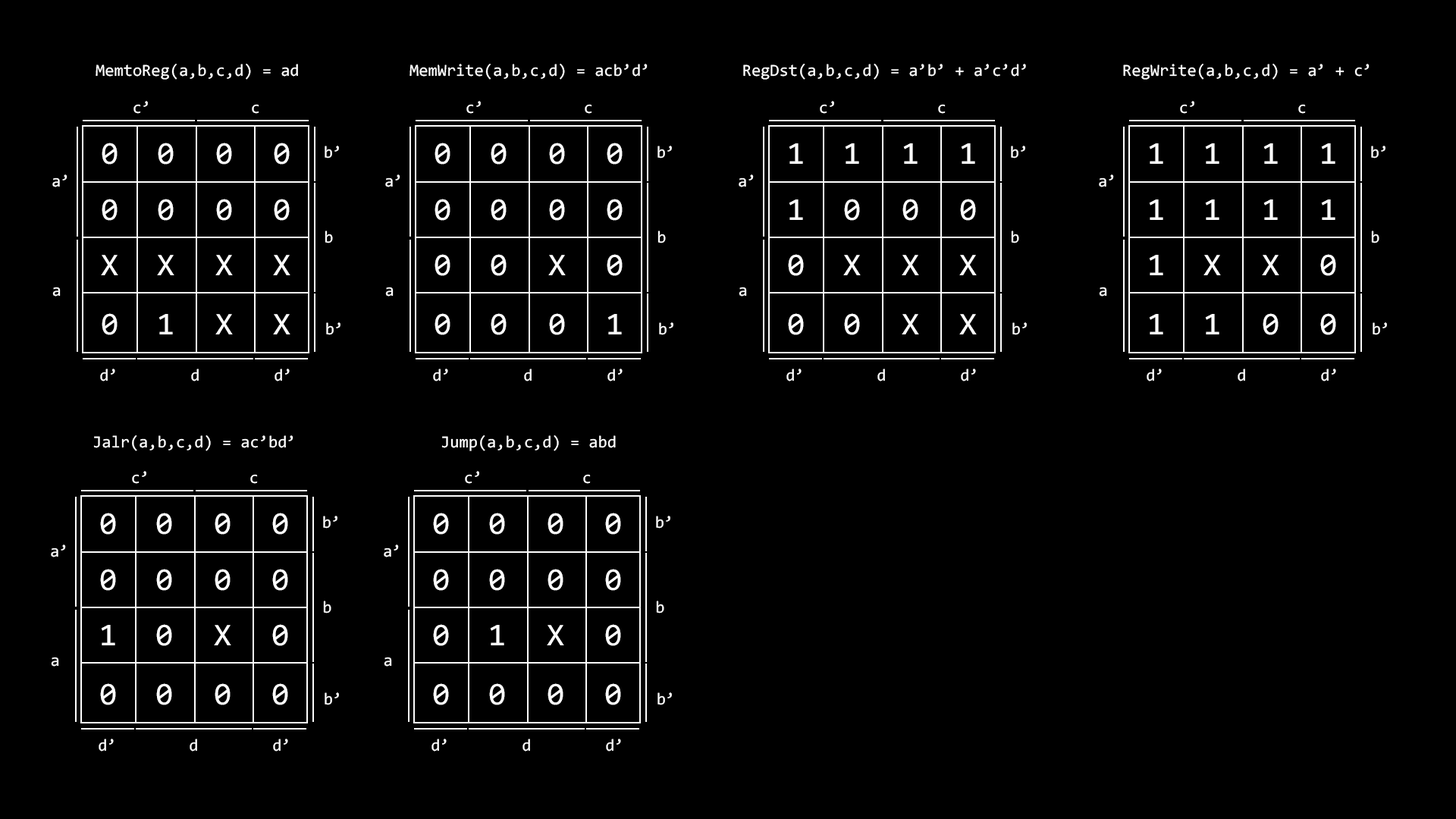
<style>
.page{position:relative;width:1456px;height:819px;background:#000000}
.page>*{position:absolute;margin:0}
.t1{font:16.8px "Consolas";color:#ffffff}
.t2{font:17px "Consolas";color:#ffffff}
.t3{font:31.8px "Consolas";color:#ffffff}
</style>
<div class="page">
<p class="t1" style="left:96px;top:64px;width:202px;height:16px">MemtoReg(a,b,c,d) = ad</p>
<p class="t1" style="left:409px;top:64px;width:239px;height:16px">MemWrite(a,b,c,d) = acb’d’</p>
<p class="t1" style="left:743px;top:64px;width:283px;height:16px">RegDst(a,b,c,d) = a’b’ + a’c’d’</p>
<p class="t1" style="left:1123px;top:64px;width:247px;height:16px">RegWrite(a,b,c,d) = a’ + c’</p>
<p class="t2" style="left:133px;top:101px;width:15px;height:13px">c’</p>
<p class="t2" style="left:466px;top:101px;width:15px;height:13px">c’</p>
<p class="t2" style="left:820px;top:101px;width:14px;height:13px">c’</p>
<p class="t2" style="left:1180px;top:101px;width:14px;height:13px">c’</p>
<p class="t2" style="left:252px;top:104px;width:7px;height:10px">c</p>
<p class="t2" style="left:585px;top:104px;width:7px;height:10px">c</p>
<p class="t2" style="left:938px;top:104px;width:8px;height:10px">c</p>
<p class="t2" style="left:1298px;top:104px;width:8px;height:10px">c</p>
<p class="t3" style="left:102px;top:143px;width:16px;height:22px">0</p>
<p class="t3" style="left:158px;top:143px;width:16px;height:22px">0</p>
<p class="t3" style="left:216px;top:143px;width:16px;height:22px">0</p>
<p class="t3" style="left:274px;top:143px;width:16px;height:22px">0</p>
<p class="t2" style="left:325px;top:146px;width:14px;height:12px">b’</p>
<p class="t3" style="left:435px;top:143px;width:15px;height:22px">0</p>
<p class="t3" style="left:491px;top:143px;width:16px;height:22px">0</p>
<p class="t3" style="left:549px;top:143px;width:16px;height:22px">0</p>
<p class="t3" style="left:607px;top:143px;width:16px;height:22px">0</p>
<p class="t2" style="left:657px;top:146px;width:15px;height:12px">b’</p>
<p class="t3" style="left:789px;top:143px;width:14px;height:21px">1</p>
<p class="t3" style="left:845px;top:143px;width:14px;height:21px">1</p>
<p class="t3" style="left:903px;top:143px;width:15px;height:21px">1</p>
<p class="t3" style="left:961px;top:143px;width:14px;height:21px">1</p>
<p class="t2" style="left:1011px;top:146px;width:14px;height:12px">b’</p>
<p class="t3" style="left:1149px;top:143px;width:14px;height:21px">1</p>
<p class="t3" style="left:1205px;top:143px;width:14px;height:21px">1</p>
<p class="t3" style="left:1263px;top:143px;width:15px;height:21px">1</p>
<p class="t3" style="left:1321px;top:143px;width:14px;height:21px">1</p>
<p class="t2" style="left:1371px;top:146px;width:14px;height:12px">b’</p>
<p class="t2" style="left:52px;top:174px;width:15px;height:13px">a’</p>
<p class="t2" style="left:385px;top:174px;width:15px;height:13px">a’</p>
<p class="t2" style="left:739px;top:174px;width:15px;height:13px">a’</p>
<p class="t2" style="left:1099px;top:174px;width:15px;height:13px">a’</p>
<p class="t3" style="left:102px;top:199px;width:16px;height:22px">0</p>
<p class="t3" style="left:158px;top:199px;width:16px;height:22px">0</p>
<p class="t3" style="left:216px;top:199px;width:16px;height:22px">0</p>
<p class="t3" style="left:274px;top:199px;width:16px;height:22px">0</p>
<p class="t3" style="left:435px;top:199px;width:15px;height:22px">0</p>
<p class="t3" style="left:491px;top:199px;width:16px;height:22px">0</p>
<p class="t3" style="left:549px;top:199px;width:16px;height:22px">0</p>
<p class="t3" style="left:607px;top:199px;width:16px;height:22px">0</p>
<p class="t3" style="left:789px;top:199px;width:14px;height:21px">1</p>
<p class="t3" style="left:844px;top:199px;width:16px;height:22px">0</p>
<p class="t3" style="left:902px;top:199px;width:16px;height:22px">0</p>
<p class="t3" style="left:960px;top:199px;width:16px;height:22px">0</p>
<p class="t3" style="left:1149px;top:199px;width:14px;height:21px">1</p>
<p class="t3" style="left:1205px;top:199px;width:14px;height:21px">1</p>
<p class="t3" style="left:1263px;top:199px;width:15px;height:21px">1</p>
<p class="t3" style="left:1321px;top:199px;width:14px;height:21px">1</p>
<p class="t2" style="left:325px;top:231px;width:8px;height:12px">b</p>
<p class="t2" style="left:657px;top:231px;width:9px;height:12px">b</p>
<p class="t2" style="left:1011px;top:231px;width:8px;height:12px">b</p>
<p class="t2" style="left:1371px;top:231px;width:8px;height:12px">b</p>
<p class="t3" style="left:101px;top:255px;width:17px;height:20px">X</p>
<p class="t3" style="left:157px;top:255px;width:17px;height:20px">X</p>
<p class="t3" style="left:215px;top:255px;width:18px;height:20px">X</p>
<p class="t3" style="left:273px;top:255px;width:17px;height:20px">X</p>
<p class="t3" style="left:435px;top:254px;width:15px;height:22px">0</p>
<p class="t3" style="left:491px;top:254px;width:16px;height:22px">0</p>
<p class="t3" style="left:548px;top:255px;width:18px;height:20px">X</p>
<p class="t3" style="left:607px;top:254px;width:16px;height:22px">0</p>
<p class="t3" style="left:788px;top:254px;width:16px;height:22px">0</p>
<p class="t3" style="left:843px;top:255px;width:18px;height:20px">X</p>
<p class="t3" style="left:902px;top:255px;width:17px;height:20px">X</p>
<p class="t3" style="left:959px;top:255px;width:18px;height:20px">X</p>
<p class="t3" style="left:1149px;top:255px;width:14px;height:20px">1</p>
<p class="t3" style="left:1203px;top:255px;width:18px;height:20px">X</p>
<p class="t3" style="left:1262px;top:255px;width:17px;height:20px">X</p>
<p class="t3" style="left:1320px;top:254px;width:16px;height:22px">0</p>
<p class="t2" style="left:52px;top:287px;width:9px;height:10px">a</p>
<p class="t2" style="left:385px;top:287px;width:9px;height:10px">a</p>
<p class="t2" style="left:739px;top:287px;width:8px;height:10px">a</p>
<p class="t2" style="left:1099px;top:287px;width:8px;height:10px">a</p>
<p class="t3" style="left:102px;top:313px;width:16px;height:22px">0</p>
<p class="t3" style="left:158px;top:314px;width:15px;height:20px">1</p>
<p class="t3" style="left:215px;top:314px;width:18px;height:20px">X</p>
<p class="t3" style="left:273px;top:314px;width:17px;height:20px">X</p>
<p class="t3" style="left:435px;top:313px;width:15px;height:22px">0</p>
<p class="t3" style="left:491px;top:313px;width:16px;height:22px">0</p>
<p class="t3" style="left:549px;top:313px;width:16px;height:22px">0</p>
<p class="t3" style="left:607px;top:314px;width:15px;height:20px">1</p>
<p class="t3" style="left:788px;top:313px;width:16px;height:22px">0</p>
<p class="t3" style="left:844px;top:313px;width:16px;height:22px">0</p>
<p class="t3" style="left:902px;top:314px;width:17px;height:20px">X</p>
<p class="t3" style="left:959px;top:314px;width:18px;height:20px">X</p>
<p class="t3" style="left:1149px;top:314px;width:14px;height:20px">1</p>
<p class="t3" style="left:1205px;top:314px;width:14px;height:20px">1</p>
<p class="t3" style="left:1263px;top:313px;width:16px;height:22px">0</p>
<p class="t3" style="left:1320px;top:313px;width:16px;height:22px">0</p>
<p class="t2" style="left:326px;top:322px;width:14px;height:13px">b’</p>
<p class="t2" style="left:659px;top:322px;width:14px;height:13px">b’</p>
<p class="t2" style="left:1012px;top:322px;width:15px;height:13px">b’</p>
<p class="t2" style="left:1373px;top:322px;width:14px;height:13px">b’</p>
<p class="t2" style="left:100px;top:369px;width:15px;height:12px">d’</p>
<p class="t2" style="left:191px;top:369px;width:8px;height:12px">d</p>
<p class="t2" style="left:275px;top:369px;width:15px;height:12px">d’</p>
<p class="t2" style="left:433px;top:369px;width:15px;height:12px">d’</p>
<p class="t2" style="left:524px;top:369px;width:8px;height:12px">d</p>
<p class="t2" style="left:607px;top:369px;width:16px;height:12px">d’</p>
<p class="t2" style="left:786px;top:369px;width:16px;height:12px">d’</p>
<p class="t2" style="left:877px;top:369px;width:8px;height:12px">d</p>
<p class="t2" style="left:961px;top:369px;width:15px;height:12px">d’</p>
<p class="t2" style="left:1147px;top:369px;width:15px;height:12px">d’</p>
<p class="t2" style="left:1238px;top:369px;width:7px;height:12px">d</p>
<p class="t2" style="left:1321px;top:369px;width:15px;height:12px">d’</p>
<p class="t1" style="left:93px;top:435px;width:200px;height:16px">Jalr(a,b,c,d) = ac’bd’</p>
<p class="t1" style="left:441px;top:435px;width:175px;height:16px">Jump(a,b,c,d) = abd</p>
<p class="t2" style="left:132px;top:471px;width:14px;height:13px">c’</p>
<p class="t2" style="left:250px;top:474px;width:8px;height:10px">c</p>
<p class="t2" style="left:465px;top:471px;width:14px;height:13px">c’</p>
<p class="t2" style="left:583px;top:474px;width:8px;height:10px">c</p>
<p class="t3" style="left:100px;top:513px;width:16px;height:22px">0</p>
<p class="t3" style="left:156px;top:513px;width:16px;height:22px">0</p>
<p class="t3" style="left:215px;top:513px;width:16px;height:22px">0</p>
<p class="t3" style="left:272px;top:513px;width:16px;height:22px">0</p>
<p class="t2" style="left:323px;top:516px;width:14px;height:13px">b’</p>
<p class="t3" style="left:433px;top:513px;width:16px;height:22px">0</p>
<p class="t3" style="left:489px;top:513px;width:16px;height:22px">0</p>
<p class="t3" style="left:548px;top:513px;width:15px;height:22px">0</p>
<p class="t3" style="left:605px;top:513px;width:16px;height:22px">0</p>
<p class="t2" style="left:656px;top:516px;width:14px;height:13px">b’</p>
<p class="t2" style="left:51px;top:544px;width:15px;height:13px">a’</p>
<p class="t2" style="left:384px;top:544px;width:15px;height:13px">a’</p>
<p class="t3" style="left:100px;top:569px;width:16px;height:22px">0</p>
<p class="t3" style="left:156px;top:569px;width:16px;height:22px">0</p>
<p class="t3" style="left:215px;top:569px;width:16px;height:22px">0</p>
<p class="t3" style="left:272px;top:569px;width:16px;height:22px">0</p>
<p class="t3" style="left:433px;top:569px;width:16px;height:22px">0</p>
<p class="t3" style="left:489px;top:569px;width:16px;height:22px">0</p>
<p class="t3" style="left:548px;top:569px;width:15px;height:22px">0</p>
<p class="t3" style="left:605px;top:569px;width:16px;height:22px">0</p>
<p class="t2" style="left:323px;top:601px;width:8px;height:12px">b</p>
<p class="t2" style="left:656px;top:601px;width:8px;height:12px">b</p>
<p class="t3" style="left:101px;top:625px;width:14px;height:20px">1</p>
<p class="t3" style="left:156px;top:624px;width:16px;height:22px">0</p>
<p class="t3" style="left:214px;top:625px;width:17px;height:20px">X</p>
<p class="t3" style="left:272px;top:624px;width:16px;height:22px">0</p>
<p class="t3" style="left:433px;top:624px;width:16px;height:22px">0</p>
<p class="t3" style="left:490px;top:625px;width:14px;height:20px">1</p>
<p class="t3" style="left:547px;top:625px;width:17px;height:20px">X</p>
<p class="t3" style="left:605px;top:624px;width:16px;height:22px">0</p>
<p class="t2" style="left:51px;top:657px;width:8px;height:10px">a</p>
<p class="t2" style="left:384px;top:657px;width:8px;height:10px">a</p>
<p class="t3" style="left:100px;top:683px;width:16px;height:22px">0</p>
<p class="t3" style="left:156px;top:683px;width:16px;height:22px">0</p>
<p class="t3" style="left:215px;top:683px;width:16px;height:22px">0</p>
<p class="t3" style="left:272px;top:683px;width:16px;height:22px">0</p>
<p class="t3" style="left:433px;top:683px;width:16px;height:22px">0</p>
<p class="t3" style="left:489px;top:683px;width:16px;height:22px">0</p>
<p class="t3" style="left:548px;top:683px;width:15px;height:22px">0</p>
<p class="t3" style="left:605px;top:683px;width:16px;height:22px">0</p>
<p class="t2" style="left:325px;top:692px;width:14px;height:13px">b’</p>
<p class="t2" style="left:657px;top:692px;width:15px;height:13px">b’</p>
<p class="t2" style="left:99px;top:739px;width:15px;height:12px">d’</p>
<p class="t2" style="left:190px;top:739px;width:7px;height:12px">d</p>
<p class="t2" style="left:273px;top:739px;width:15px;height:12px">d’</p>
<p class="t2" style="left:431px;top:739px;width:16px;height:12px">d’</p>
<p class="t2" style="left:522px;top:739px;width:8px;height:12px">d</p>
<p class="t2" style="left:606px;top:739px;width:15px;height:12px">d’</p>
</div>
